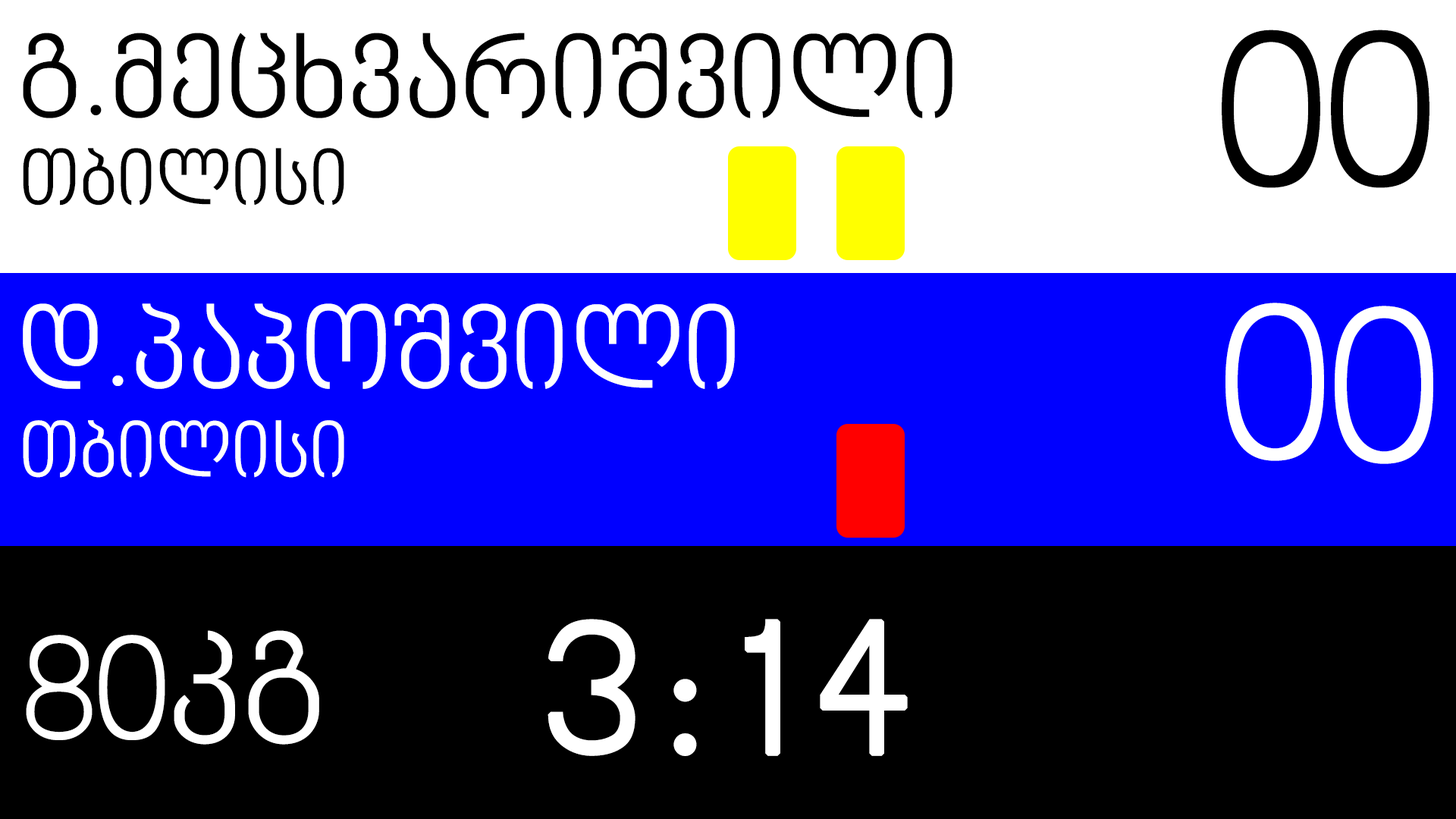
<style>
.page{position:relative;width:1456px;height:819px;background:#000000}
.page>*{position:absolute;margin:0}
.t1{font:227.5px "BPGNinoMtavruli";color:#000000}
.t2{font:113.7px "BPGNinoMtavruli";color:#000000}
.t3{font:75.8px "BPGNinoMtavruli";color:#000000}
.t4{font:113.7px "BPGNinoMtavruli";color:#ffffff}
.t5{font:227.5px "BPGNinoMtavruli";color:#ffffff}
.t6{font:75.8px "BPGNinoMtavruli";color:#ffffff}
.t7{font:189.6px "BPGNinoMtavruli";letter-spacing:0.1em;color:#ffffff;font-weight:bold}
.t8{font:151.7px "BPGNinoMtavruli";color:#ffffff}
</style>
<div class="page">
<p class="t1" style="left:1222px;top:30px;width:98px;height:158px">0</p>
<p class="t1" style="left:1331px;top:30px;width:98px;height:158px">0</p>
<p class="t2" style="left:23px;top:33px;width:929px;height:85px">გ.მეცხვარიშვილი</p>
<p class="t3" style="left:23px;top:148px;width:321px;height:58px">თბილისი</p>
<p class="t4" style="left:23px;top:303px;width:712px;height:86px">დ.პაპოშვილი</p>
<p class="t5" style="left:1225px;top:303px;width:99px;height:158px">0</p>
<p class="t5" style="left:1335px;top:306px;width:98px;height:158px">0</p>
<p class="t6" style="left:23px;top:420px;width:321px;height:58px">თბილისი</p>
<p class="t7" style="left:548px;top:619px;width:360px;height:137px">3:14</p>
<p class="t8" style="left:26px;top:630px;width:293px;height:115px">80კგ</p>
</div>
